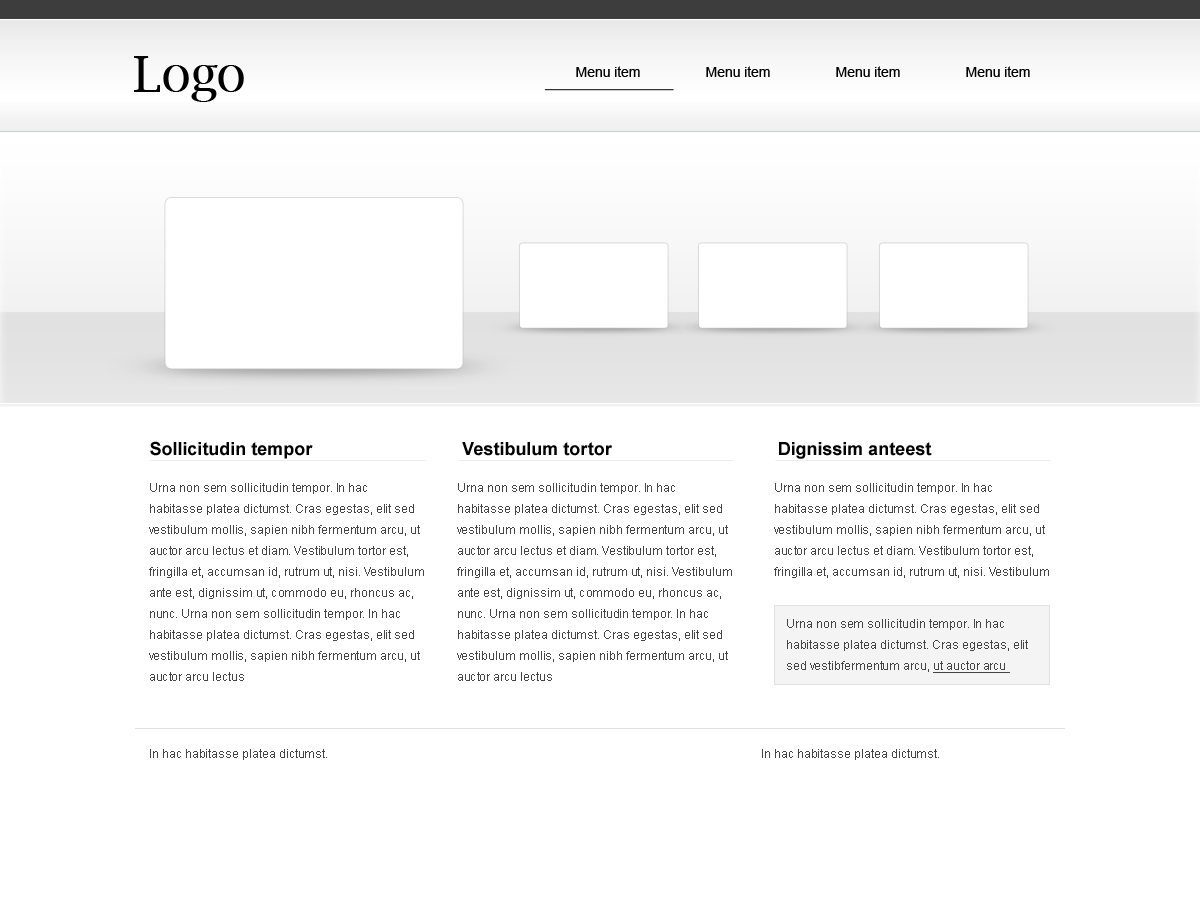
<style>
.page{position:relative;width:1200px;height:903px;background:#ffffff}
.page>*{position:absolute;margin:0}
.t1{font:50px "LucidaBright";color:#000000}
.t2{font:14px "ArialMT";color:#000000}
.t3{font:18px "Arial-BoldMT";color:#000000}
.t4{font:12px/21px "ArialMT";color:#444444}
.t5{font:12px/21px "ArialMT";color:#444444;text-decoration:underline}
.t6{font:12px "ArialMT";color:#444444}
</style>
<div class="page">
<p class="t1" style="left:134px;top:56px;width:110px;height:46px">Logo</p>
<p class="t2" style="left:576px;top:66px;width:64px;height:11px">Menu item</p>
<p class="t2" style="left:706px;top:66px;width:64px;height:11px">Menu item</p>
<p class="t2" style="left:836px;top:66px;width:64px;height:11px">Menu item</p>
<p class="t2" style="left:966px;top:66px;width:64px;height:11px">Menu item</p>
<p class="t3" style="left:150px;top:441px;width:163px;height:18px">Sollicitudin tempor</p>
<p class="t3" style="left:462px;top:442px;width:150px;height:14px">Vestibulum tortor</p>
<p class="t3" style="left:779px;top:442px;width:153px;height:17px">Dignissim anteest</p>
<p class="t4" style="left:149px;top:483px;width:275px;height:198px">Urna non sem sollicitudin tempor. In hac habitasse platea dictumst. Cras egestas, elit sed vestibulum mollis, sapien nibh fermentum arcu, ut auctor arcu lectus et diam. Vestibulum tortor est, fringilla et, accumsan id, rutrum ut, nisi. Vestibulum ante est, dignissim ut, commodo eu, rhoncus ac, nunc. Urna non sem sollicitudin tempor. In hac habitasse platea dictumst. Cras egestas, elit sed vestibulum mollis, sapien nibh fermentum arcu, ut auctor arcu lectus</p>
<p class="t4" style="left:457px;top:483px;width:275px;height:198px">Urna non sem sollicitudin tempor. In hac habitasse platea dictumst. Cras egestas, elit sed vestibulum mollis, sapien nibh fermentum arcu, ut auctor arcu lectus et diam. Vestibulum tortor est, fringilla et, accumsan id, rutrum ut, nisi. Vestibulum ante est, dignissim ut, commodo eu, rhoncus ac, nunc. Urna non sem sollicitudin tempor. In hac habitasse platea dictumst. Cras egestas, elit sed vestibulum mollis, sapien nibh fermentum arcu, ut auctor arcu lectus</p>
<p class="t4" style="left:774px;top:483px;width:275px;height:95px">Urna non sem sollicitudin tempor. In hac habitasse platea dictumst. Cras egestas, elit sed vestibulum mollis, sapien nibh fermentum arcu, ut auctor arcu lectus et diam. Vestibulum tortor est, fringilla et, accumsan id, rutrum ut, nisi. Vestibulum</p>
<p class="t4" style="left:787px;top:619px;width:241px;height:54px">Urna non sem sollicitudin tempor. In hac habitasse platea dictumst. Cras egestas, elit sed vestibfermentum arcu, <span class="t5">ut auctor arcu</span></p>
<p class="t6" style="left:150px;top:749px;width:177px;height:11px">In hac habitasse platea dictumst.</p>
<p class="t6" style="left:762px;top:749px;width:177px;height:11px">In hac habitasse platea dictumst.</p>
</div>
